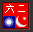
<style>
.page{position:relative;width:33px;height:32px;background:#f20000}
.page>*{position:absolute;margin:0}
.t1{font:10.4px "SimSun";color:#ffffff}
</style>
<div class="page">
<p class="t1" style="left:5px;top:4px;width:20px;height:9px">六二</p>
</div>
